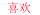
<style>
.page{position:relative;width:40px;height:15px;background:#ffffff}
.page>*{position:absolute;margin:0}
.t1{font:12px "SimSun"}
</style>
<div class="page">
<p class="t1" style="left:7px;top:2px;width:24px;height:12px">喜欢</p>
</div>
